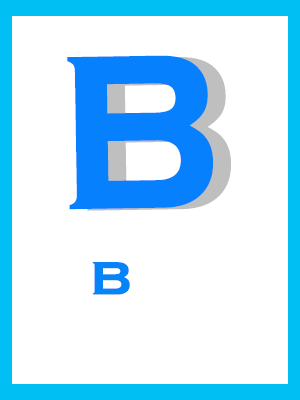
<style>
.page{position:relative;width:300px;height:400px;background:#ffffff}
.page>*{position:absolute;margin:0}
.t1{font:277.7px "CopperplateGothic-Bold";color:#0680fc;scale:0.87 1}
.t2{font:59px "CopperplateGothic-Bold";color:#0584fa;scale:1.04 1}
.t3{font:59px "CopperplateGothic-Bold";color:#fa0515;scale:1.04 1}
</style>
<div class="page">
<p class="t1" style="left:67px;top:55px;width:146px;height:155px;rotate:-1deg">b</p>
<p class="t1" style="left:85px;top:57px;width:146px;height:154px;rotate:-1deg">b</p>
<p class="t2" style="left:92px;top:262px;width:38px;height:33px"><span class="t3">  </span>b</p>
</div>
